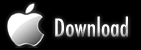
<style>
.page{position:relative;width:141px;height:50px;background:#000000}
.page>*{position:absolute;margin:0}
.t1{font:24px "Futura-CondensedMedium"}
</style>
<div class="page">
<p class="t1" style="left:55px;top:16px;width:73px;height:21px">Download</p>
</div>
